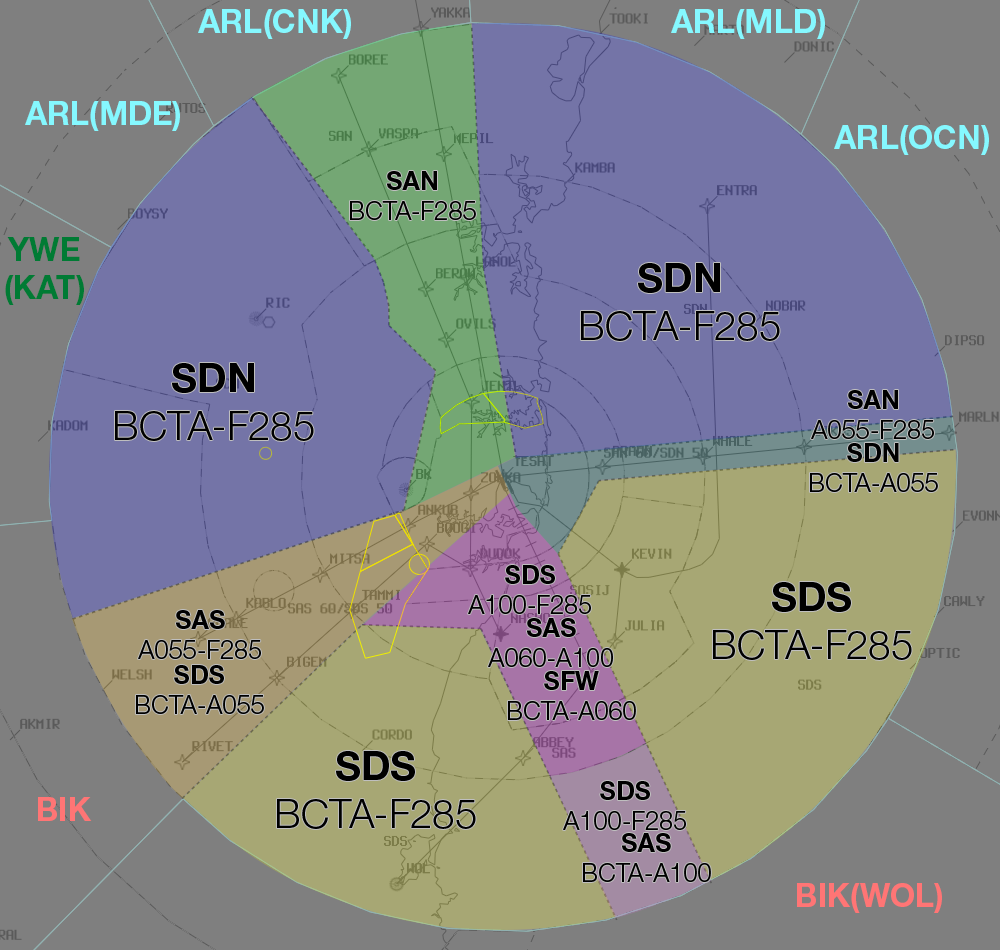
<style>
.page{position:relative;width:1000px;height:950px;background:#7f7f7f}
.page>*{position:absolute;margin:0}
.t1{font:32.2px "HelveticaNeueLTStd-Bd";color:#85f8ff}
.t2{font:25.3px "HelveticaNeueLTStd-Lt";color:#000000}
.t3{font:25.3px "HelveticaNeueLTStd-Bd";color:#000000}
.t4{font:32.2px "HelveticaNeueLTStd-Bd";color:#007b34}
.t5{font:40px "HelveticaNeueLTStd-Lt";color:#000000}
.t6{font:40px "HelveticaNeueLTStd-Bd";color:#000000}
.t7{font:32.2px "HelveticaNeueLTStd-Bd";color:#ff7575}
</style>
<div class="page">
<p class="t1" style="left:198px;top:9px;width:153px;height:30px">ARL(CNK)</p>
<p class="t1" style="left:671px;top:9px;width:154px;height:30px">ARL(MLD)</p>
<p class="t1" style="left:25px;top:101px;width:155px;height:30px">ARL(MDE)</p>
<p class="t1" style="left:834px;top:125px;width:155px;height:30px">ARL(OCN)</p>
<p class="t2" style="left:350px;top:171px;width:126px;height:49px;text-align:center"><span class="t3">SAN<br></span>BCTA-F285</p>
<p class="t4" style="left:5px;top:237px;width:79px;height:68px;text-align:center">YWE<br>(KAT)</p>
<p class="t5" style="left:581px;top:263px;width:199px;height:78px;text-align:center"><span class="t6">SDN<br></span>BCTA-F285</p>
<p class="t5" style="left:115px;top:363px;width:199px;height:78px;text-align:center"><span class="t6">SDN<br></span>BCTA-F285</p>
<p class="t2" style="left:811px;top:390px;width:123px;height:49px;text-align:center"><span class="t3">SAN<br></span>A055-F285</p>
<p class="t2" style="left:810px;top:443px;width:128px;height:49px;text-align:center"><span class="t3">SDN<br></span>BCTA-A055</p>
<p class="t2" style="left:468px;top:565px;width:123px;height:49px;text-align:center"><span class="t3">SDS<br></span>A100-F285</p>
<p class="t5" style="left:713px;top:582px;width:199px;height:78px;text-align:center"><span class="t6">SDS<br></span>BCTA-F285</p>
<p class="t2" style="left:138px;top:610px;width:123px;height:49px;text-align:center"><span class="t3">SAS<br></span>A055-F285</p>
<p class="t2" style="left:488px;top:618px;width:125px;height:49px;text-align:center"><span class="t3">SAS<br></span>A060-A100</p>
<p class="t2" style="left:136px;top:665px;width:128px;height:49px;text-align:center"><span class="t3">SDS<br></span>BCTA-A055</p>
<p class="t2" style="left:508px;top:671px;width:128px;height:49px;text-align:center"><span class="t3">SFW<br></span>BCTA-A060</p>
<p class="t5" style="left:277px;top:751px;width:199px;height:78px;text-align:center"><span class="t6">SDS<br></span>BCTA-F285</p>
<p class="t2" style="left:563px;top:781px;width:123px;height:49px;text-align:center"><span class="t3">SDS<br></span>A100-F285</p>
<p class="t7" style="left:38px;top:797px;width:54px;height:24px">BIK</p>
<p class="t2" style="left:583px;top:833px;width:128px;height:49px;text-align:center"><span class="t3">SAS<br></span>BCTA-A100</p>
<p class="t7" style="left:797px;top:883px;width:145px;height:30px">BIK(WOL)</p>
</div>
